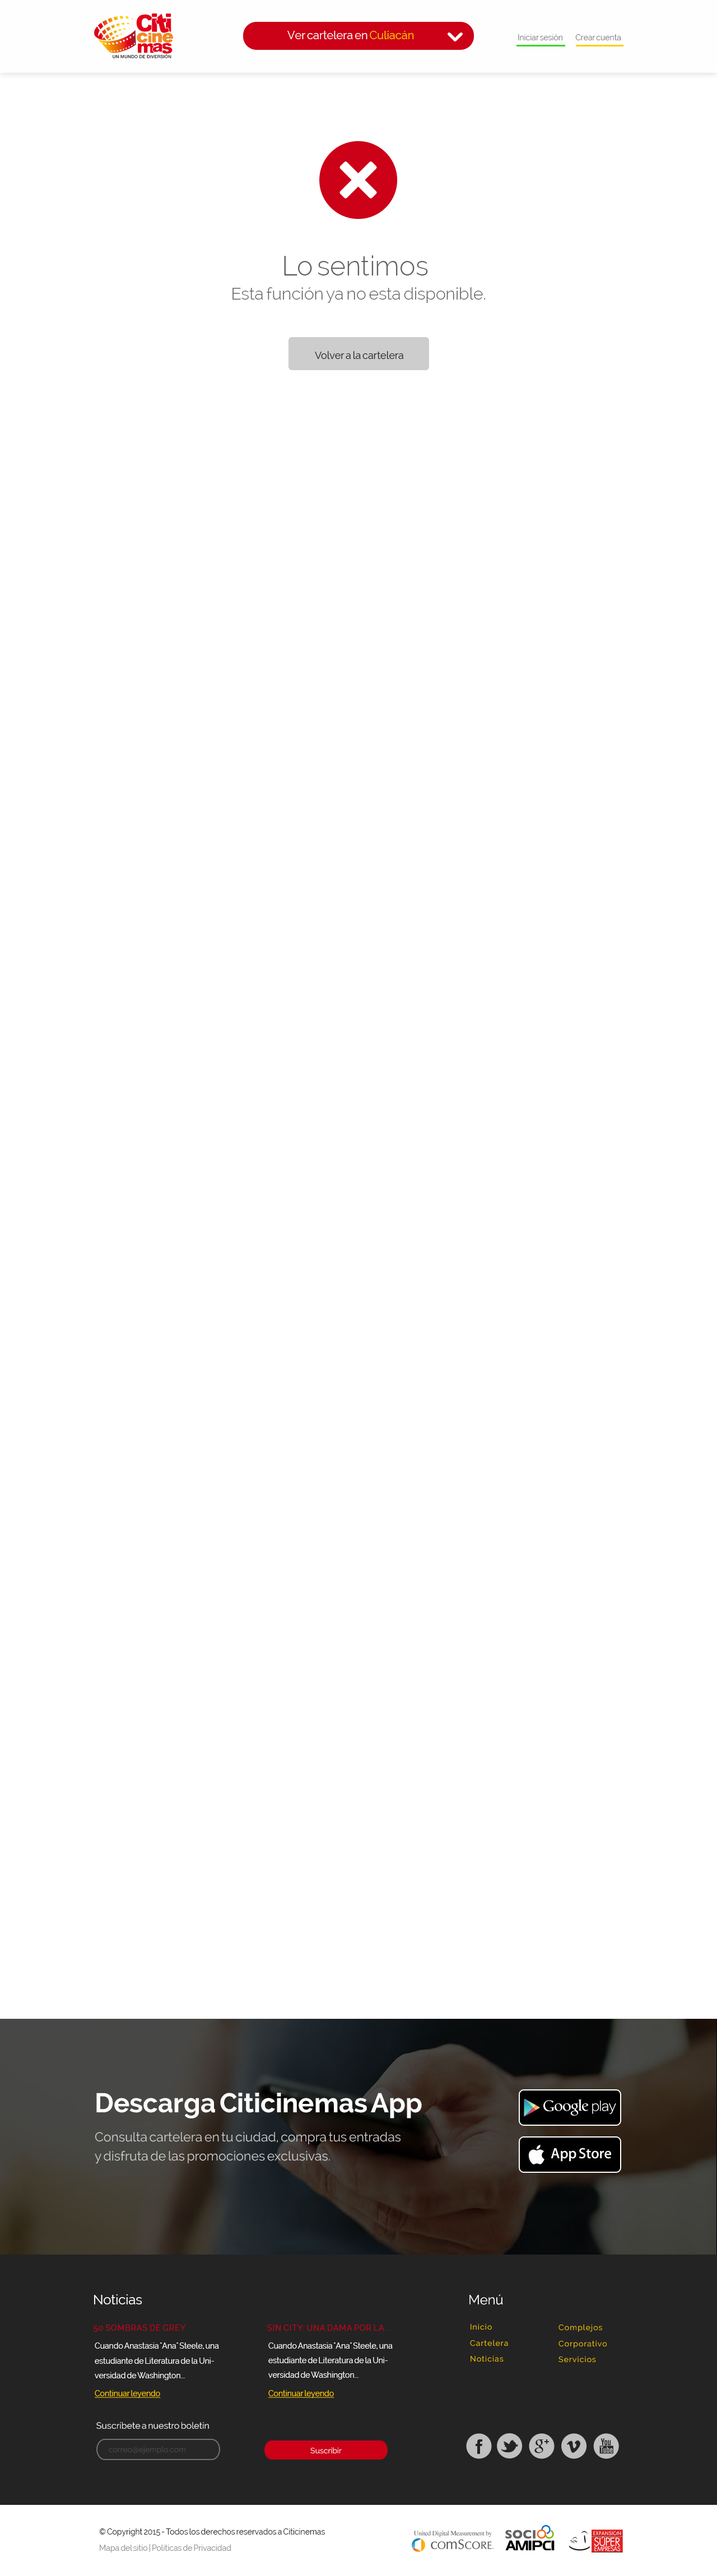
<style>
.page{position:relative;width:717px;height:2576px;background:#ffffff}
.page>*{position:absolute;margin:0}
.t1{font:11.2px "Raleway";color:#ffffff}
.t2{font:11.2px "Raleway";color:#f7c700}
.t3{font:7.8px "Raleway";color:#818386}
.t4{font:16.8px/23.9px "Raleway-Light";color:#5f5f5f}
.t5{font:26.9px/23.9px "Raleway-Light";color:#5f5f5f}
.t6{font:10.1px "Raleway";color:#232323}
.t7{font:13.5px "Raleway";color:#ffffff}
.t8{font:7.8px "Raleway";letter-spacing:0.08em;color:#cc0017}
.t9{font:7.8px/16px "Raleway";letter-spacing:0.08em;color:#fdcb00}
.t10{font:7.8px/14.9px "Raleway";color:#ffffff}
.t11{font:7.8px/14.6px "Raleway";color:#ffffff}
.t12{font:7.8px "Raleway";color:#fecc00;text-decoration:underline}
.t13{font:9px "Raleway";color:#ffffff}
.t14{font:7.8px "Raleway";color:#4f4f4f}
.t15{font:7.8px "Raleway";color:#ffffff}
.t16{font:7.8px/16px "Raleway";color:#232323}
.t17{font:7.8px/16px "Raleway";color:#909090}
</style>
<div class="page">
<p class="t1" style="left:287px;top:31px;width:127px;height:8px">Ver cartelera en <span class="t2">Culiacán</span></p>
<p class="t3" style="left:518px;top:34px;width:44px;height:6px">Iniciar sesión</p>
<p class="t3" style="left:575px;top:34px;width:46px;height:6px">Crear cuenta</p>
<p class="t4" style="left:232px;top:255px;width:253px;height:48px;text-align:center"><span class="t5">Lo sentimos <br></span>Esta función ya no esta disponible.</p>
<p class="t6" style="left:315px;top:351px;width:89px;height:8px">Volver a la cartelera</p>
<p class="t7" style="left:94px;top:2294px;width:48px;height:10px">Noticias</p>
<p class="t7" style="left:469px;top:2294px;width:34px;height:11px">Menú</p>
<p class="t8" style="left:94px;top:2325px;width:91px;height:7px">50 SOMBRAS DE GREY</p>
<p class="t8" style="left:267px;top:2325px;width:124px;height:6px">SIN CITY: UNA DAMA POR LA ...</p>
<p class="t9" style="left:470px;top:2323px;width:38px;height:39px">Inicio<br>Cartelera<br>Noticias</p>
<p class="t9" style="left:558px;top:2324px;width:48px;height:39px">Complejos<br>Corporativo<br>Servicios</p>
<p class="t10" style="left:95px;top:2342px;width:124px;height:38px">Cuando Anastasia "Ana" Steele, una estudiante de Literatura de la Universidad de Washington...</p>
<p class="t11" style="left:268px;top:2342px;width:125px;height:37px">Cuando Anastasia "Ana" Steele, una estudiante de Literatura de la Universidad de Washington...</p>
<p class="t12" style="left:95px;top:2390px;width:66px;height:8px">Continuar leyendo</p>
<p class="t12" style="left:268px;top:2390px;width:66px;height:8px">Continuar leyendo</p>
<p class="t13" style="left:96px;top:2422px;width:113px;height:7px">Suscríbete a nuestro boletín</p>
<p class="t14" style="left:109px;top:2446px;width:76px;height:8px">correo@ejemplo.com</p>
<p class="t15" style="left:310px;top:2447px;width:32px;height:7px">Suscribir</p>
<p class="t16" style="left:99px;top:2528px;width:226px;height:24px">© Copyright 2015 - Todos los derechos reservados a Citicinemas<br><span class="t17">Mapa del sitio | Politicas de Privacidad</span></p>
</div>
